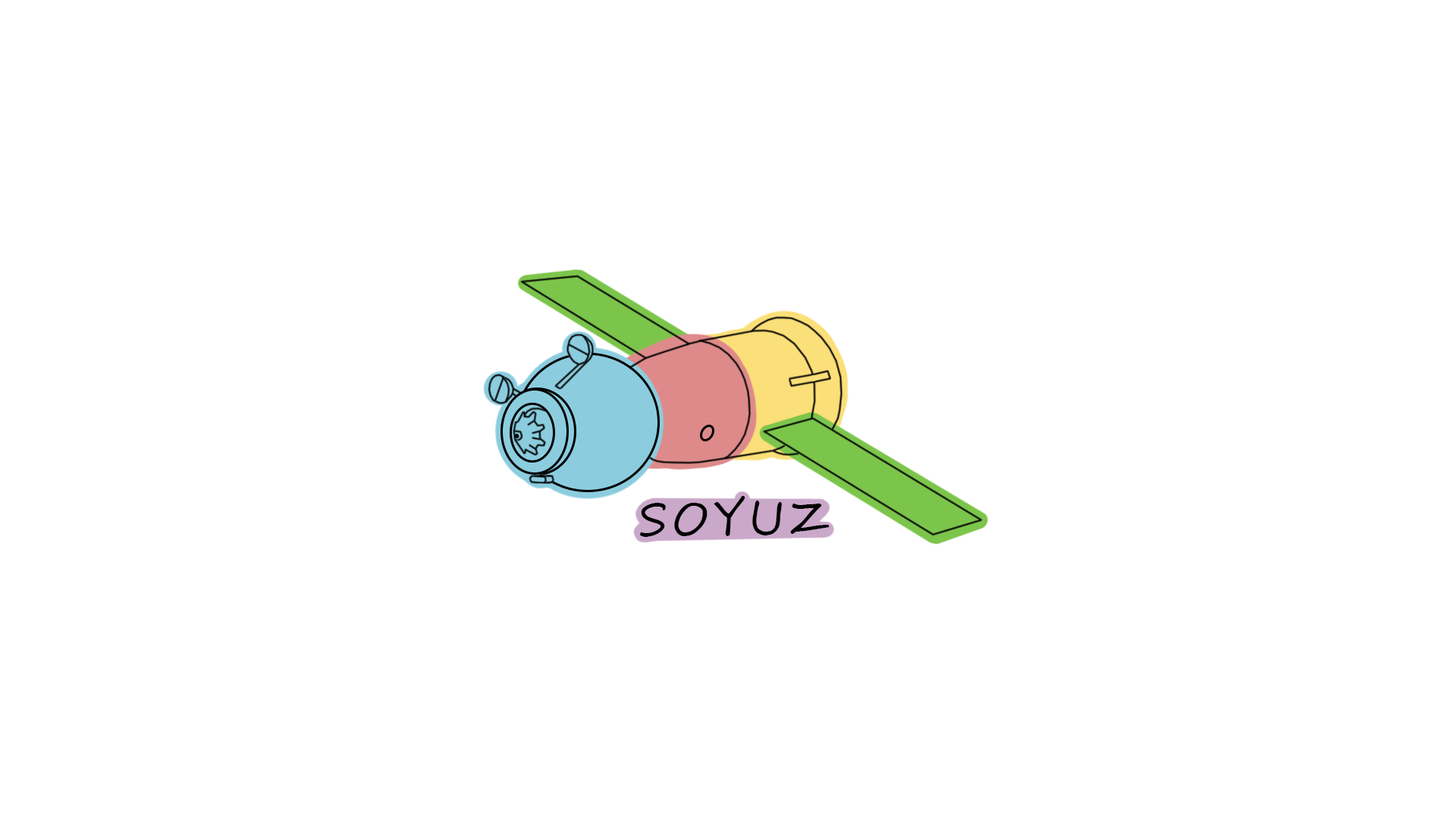
<style>
.page{position:relative;width:1456px;height:819px;background:#ffffff}
.page>*{position:absolute;margin:0}
.t1{font:45.5px "SegoeScript";letter-spacing:0.1em;color:#000000}
</style>
<div class="page">
<p class="t1" style="left:640px;top:496px;width:190px;height:41px">SOYUZ</p>
</div>
